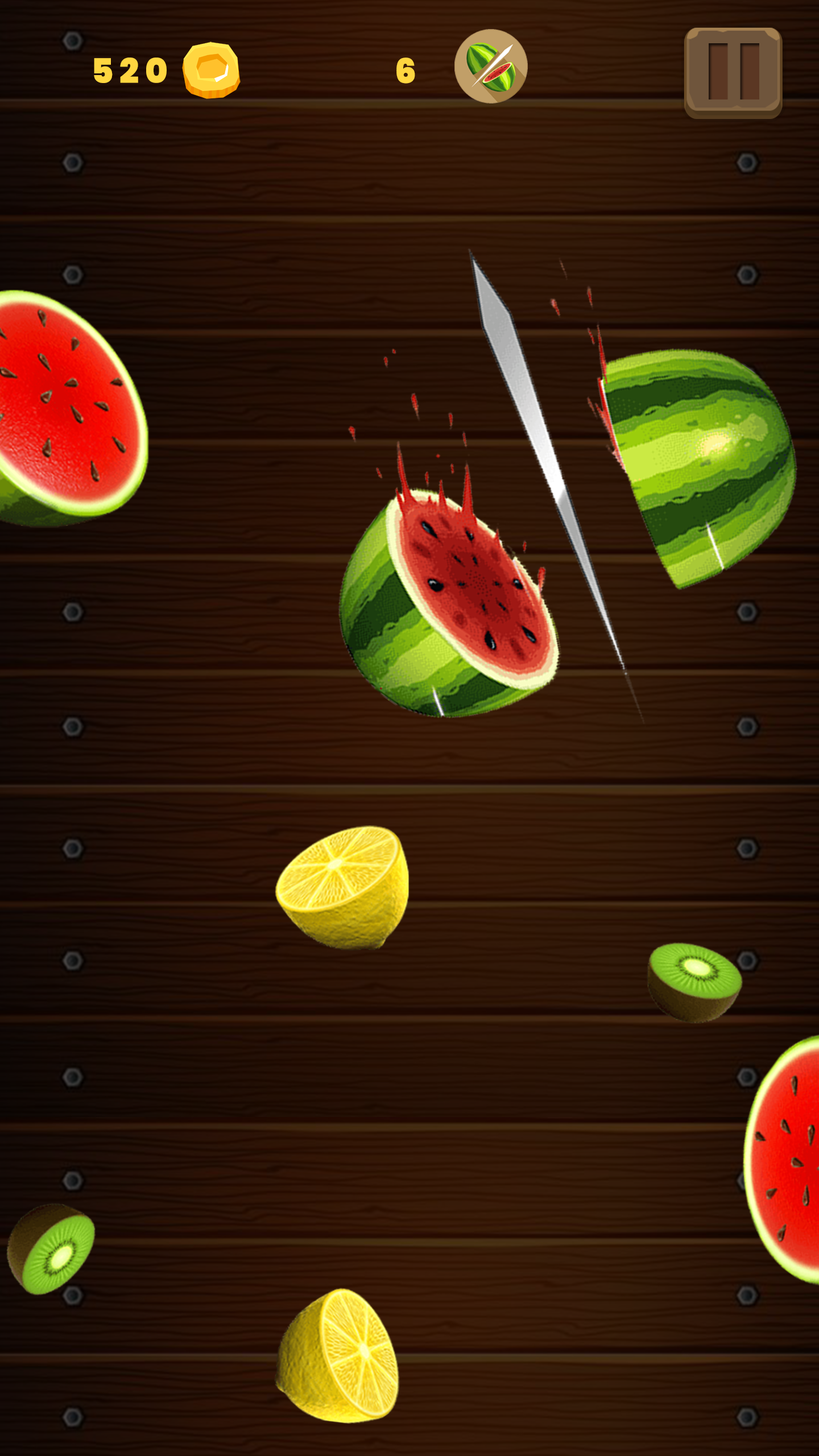
<style>
.page{position:relative;width:819px;height:1456px}
.page>*{position:absolute;margin:0}
.t1{font:34.1px "Poppins-Black";letter-spacing:0.18em;color:#ffd640;text-transform:uppercase}
</style>
<div class="page">
<p class="t1" style="left:94px;top:57px;width:73px;height:26px">520</p>
<p class="t1" style="left:396px;top:57px;width:19px;height:27px">6</p>
</div>
